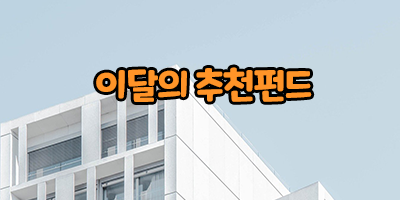
<style>
.page{position:relative;width:400px;height:200px}
.page>*{position:absolute;margin:0}
.t1{font:36px "MaplestoryBold";letter-spacing:-0.025em;color:#ff9428}
</style>
<div class="page">
<p class="t1" style="left:96px;top:67px;width:216px;height:35px">이달의 추천펀드</p>
</div>
